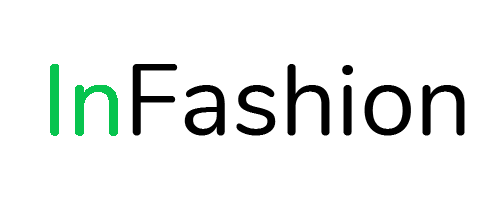
<style>
.page{position:relative;width:500px;height:200px;background:#ffffff}
.page>*{position:absolute;margin:0}
.t1{font:100px "Nunito-Regular";color:#000000}
</style>
<div class="page">
<p class="t1" style="left:50px;top:64px;width:415px;height:72px">InFashion</p>
</div>
